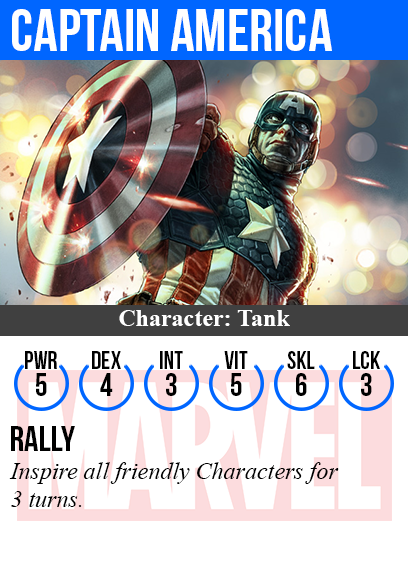
<style>
.page{position:relative;width:408px;height:585px;background:#ffffff}
.page>*{position:absolute;margin:0}
.t1{font:60px "BebasNeue";color:#ffffff}
.t2{font:24px "TimesNewRomanPS-BoldMT";color:#ffffff}
.t3{font:25px "BebasNeue";color:#000000}
.t4{font:32px "BebasNeue";color:#000000}
.t5{font:36px "BebasNeue";color:#000000}
.t6{font:24px "TimesNewRomanPS-ItalicMT";color:#000000}
</style>
<div class="page">
<p class="t1" style="left:12px;top:9px;width:320px;height:42px">captain america</p>
<p class="t2" style="left:119px;top:310px;width:171px;height:16px">Character: Tank</p>
<p class="t3" style="left:25px;top:351px;width:32px;height:18px">PWR</p>
<p class="t3" style="left:92px;top:351px;width:29px;height:18px">dex</p>
<p class="t3" style="left:160px;top:351px;width:23px;height:18px">int</p>
<p class="t3" style="left:224px;top:351px;width:24px;height:18px">vit</p>
<p class="t3" style="left:287px;top:351px;width:28px;height:18px">skl</p>
<p class="t3" style="left:353px;top:351px;width:27px;height:18px">lck</p>
<p class="t4" style="left:36px;top:373px;width:11px;height:23px">5</p>
<p class="t4" style="left:100px;top:373px;width:13px;height:23px">4</p>
<p class="t4" style="left:166px;top:373px;width:11px;height:23px">3</p>
<p class="t4" style="left:231px;top:373px;width:11px;height:23px">5</p>
<p class="t4" style="left:296px;top:373px;width:11px;height:23px">6</p>
<p class="t4" style="left:361px;top:373px;width:11px;height:23px">3</p>
<p class="t5" style="left:11px;top:426px;width:64px;height:25px">rally</p>
<p class="t6" style="left:9px;top:462px;width:330px;height:45px">Inspire all friendly Characters for<br>3 turns.</p>
</div>
